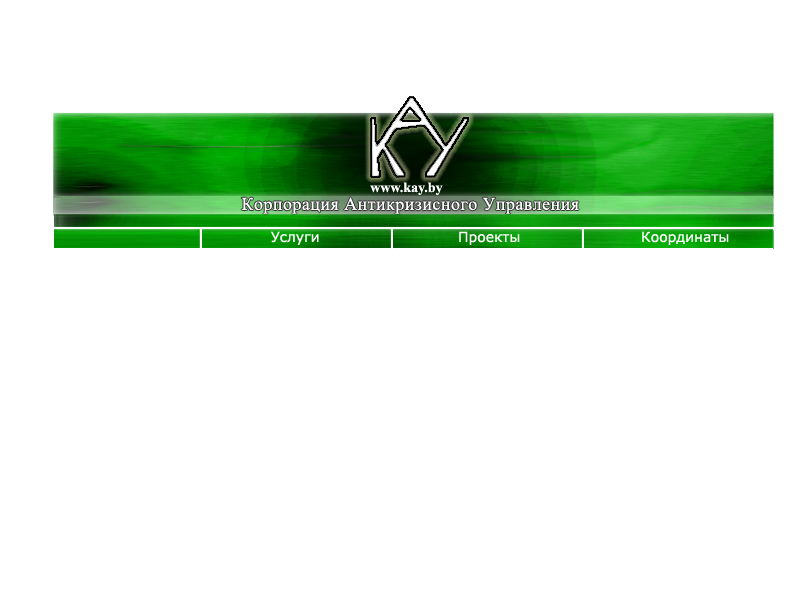
<style>
.page{position:relative;width:800px;height:600px;background:#ffffff}
.page>*{position:absolute;margin:0}
.t1{font:14px "TimesNewRomanPS-BoldMT";color:#ffffff}
.t2{font:18px "TimesNewRomanPSMT";letter-spacing:0.025em;color:#ffffff}
.t3{font:14px "Verdana";color:#ffffff}
</style>
<div class="page">
<p class="t1" style="left:370px;top:182px;width:73px;height:13px">www.kay.by</p>
<p class="t2" style="left:241px;top:197px;width:338px;height:17px">Корпорация Антикризисного Управления</p>
<p class="t3" style="left:271px;top:231px;width:48px;height:14px">Услуги</p>
<p class="t3" style="left:459px;top:231px;width:61px;height:14px">Проекты</p>
<p class="t3" style="left:642px;top:231px;width:87px;height:14px">Координаты</p>
</div>
